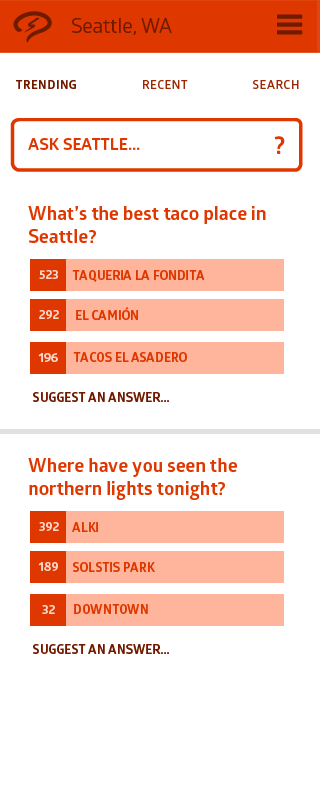
<style>
.page{position:relative;width:320px;height:800px;background:#ffffff}
.page>*{position:absolute;margin:0}
.t1{font:20px "GloberRegular";color:#701b00}
.t2{font:12px "GloberSemiBold";letter-spacing:0.05em;color:#9b2904;text-transform:uppercase}
.t3{font:12px "GloberBold";letter-spacing:0.05em;color:#701b00;text-transform:uppercase}
.t4{font:25.5px "GloberBold";color:#df3700;text-transform:uppercase}
.t5{font:16.7px "GloberBold";color:#df3700;text-transform:uppercase}
.t6{font:19px "GloberBold";color:#df3700}
.t7{font:12.7px "GloberBold";color:#f9d7cc;text-transform:uppercase}
.t8{font:12.7px "GloberBold";color:#df3700;text-transform:uppercase}
.t9{font:12.7px "GloberBold";color:#701b00;text-transform:uppercase}
</style>
<div class="page">
<p class="t1" style="left:72px;top:18px;width:100px;height:17px">Seattle, WA</p>
<p class="t2" style="left:16px;top:80px;width:283px;height:9px"><span class="t3">trending </span>recent search</p>
<p class="t4" style="left:274px;top:136px;width:11px;height:18px">?</p>
<p class="t5" style="left:28px;top:138px;width:112px;height:12px">Ask Seattle...</p>
<p class="t6" style="left:28px;top:206px;width:238px;height:37px">What’s the best taco place in Seattle?</p>
<p class="t7" style="left:39px;top:270px;width:19px;height:9px">523</p>
<p class="t8" style="left:72px;top:270px;width:133px;height:12px">Taqueria La Fondita</p>
<p class="t7" style="left:39px;top:310px;width:20px;height:9px">292</p>
<p class="t8" style="left:76px;top:307px;width:62px;height:13px">El Camión</p>
<p class="t7" style="left:38px;top:353px;width:20px;height:9px">196</p>
<p class="t8" style="left:73px;top:352px;width:114px;height:10px">Tacos El Asadero</p>
<p class="t9" style="left:33px;top:392px;width:136px;height:10px">suggest an answer...</p>
<p class="t6" style="left:28px;top:458px;width:209px;height:42px">Where have you seen the northern lights tonight?</p>
<p class="t7" style="left:39px;top:522px;width:20px;height:9px">392</p>
<p class="t8" style="left:72px;top:522px;width:26px;height:10px">alki</p>
<p class="t7" style="left:38px;top:562px;width:20px;height:9px">189</p>
<p class="t8" style="left:73px;top:562px;width:82px;height:10px">solstis park</p>
<p class="t7" style="left:42px;top:605px;width:13px;height:9px">32</p>
<p class="t8" style="left:74px;top:604px;width:74px;height:10px">downtown</p>
<p class="t9" style="left:33px;top:644px;width:136px;height:10px">suggest an answer...</p>
</div>
